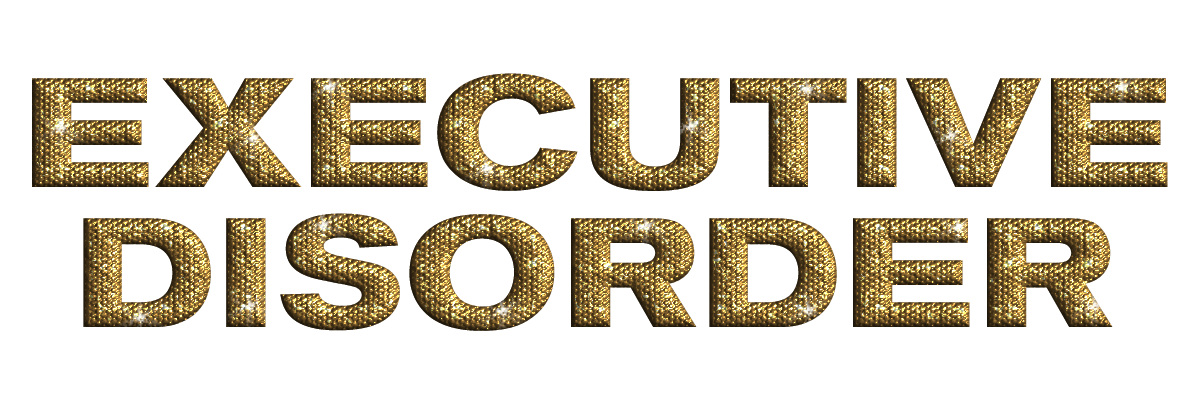
<style>
.page{position:relative;width:1200px;height:400px;background:#ffffff}
.page>*{position:absolute;margin:0}
.t1{font:154.2px "THE_DONALD";letter-spacing:0.025em;text-transform:uppercase}
</style>
<div class="page">
<p class="t1" style="left:32px;top:73px;width:1136px;height:118px">EXECUTIVE</p>
<p class="t1" style="left:32px;top:73px;width:1136px;height:118px">EXECUTIVE</p>
<p class="t1" style="left:83px;top:213px;width:1030px;height:118px">DISORDER</p>
<p class="t1" style="left:83px;top:213px;width:1030px;height:118px">DISORDER</p>
</div>
